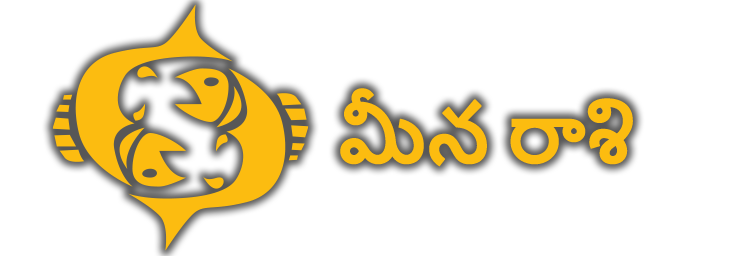
<style>
.page{position:relative;width:749px;height:256px;background:#ffffff}
.page>*{position:absolute;margin:0}
.t1{font:70.8px "NirmalaUI-Bold";letter-spacing:-0.05em;color:#fcbc10;text-transform:uppercase;font-weight:bold}
</style>
<div class="page">
<p class="t1" style="left:340px;top:88px;width:293px;height:79px">మీన రాశి</p>
</div>
